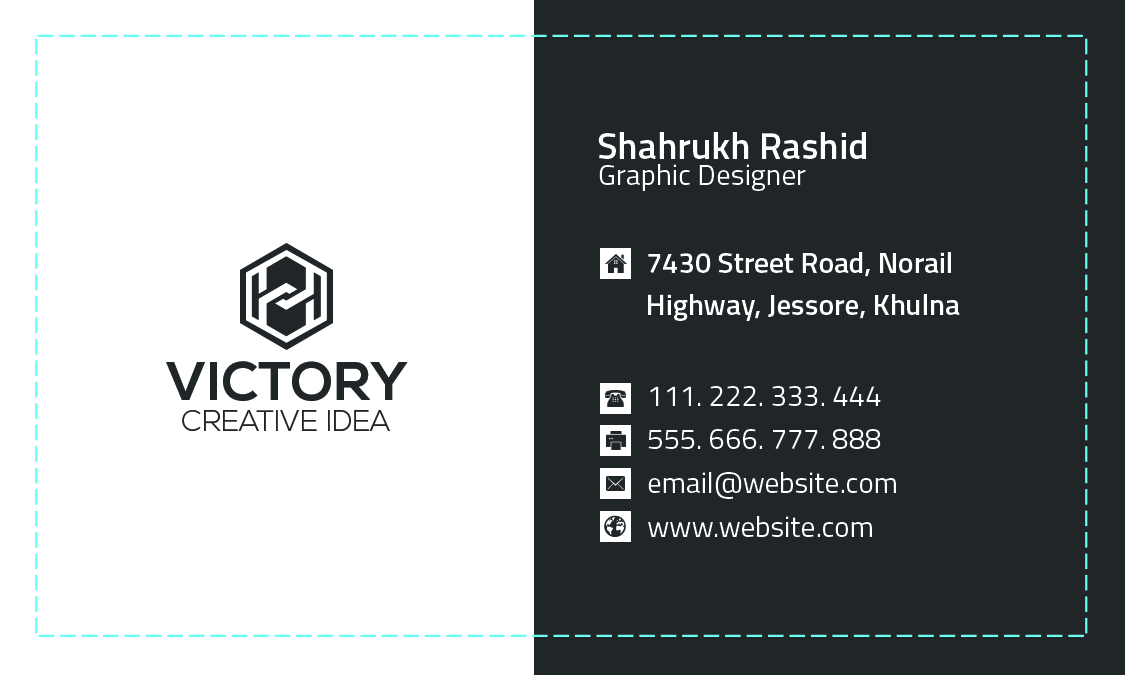
<style>
.page{position:relative;width:1125px;height:675px;background:#202528}
.page>*{position:absolute;margin:0}
.t1{font:37.5px "Titillium-Semibold";color:#ffffff}
.t2{font:29.2px "Titillium-Regular";color:#ffffff}
.t3{font:29.2px/41.7px "Titillium-Semibold";color:#ffffff}
.t4{font:54.2px "NexaBold";color:#202528}
.t5{font:29.2px/43.8px "Titillium-Regular";color:#ffffff}
.t6{font:29.2px "NexaLight";color:#202528}
</style>
<div class="page">
<p class="t1" style="left:598px;top:132px;width:268px;height:27px">Shahrukh Rashid</p>
<p class="t2" style="left:599px;top:164px;width:207px;height:27px">Graphic Designer</p>
<p class="t3" style="left:648px;top:252px;width:312px;height:69px">7430 Street Road, Norail <br>Highway, Jessore, Khulna</p>
<p class="t4" style="left:166px;top:361px;width:242px;height:40px">VICTORY</p>
<p class="t5" style="left:648px;top:386px;width:248px;height:151px">111. 222. 333. 444<br>555. 666. 777. 888<br>email@website.com<br>www.website.com</p>
<p class="t6" style="left:182px;top:410px;width:208px;height:21px">CREATIVE IDEA</p>
</div>
